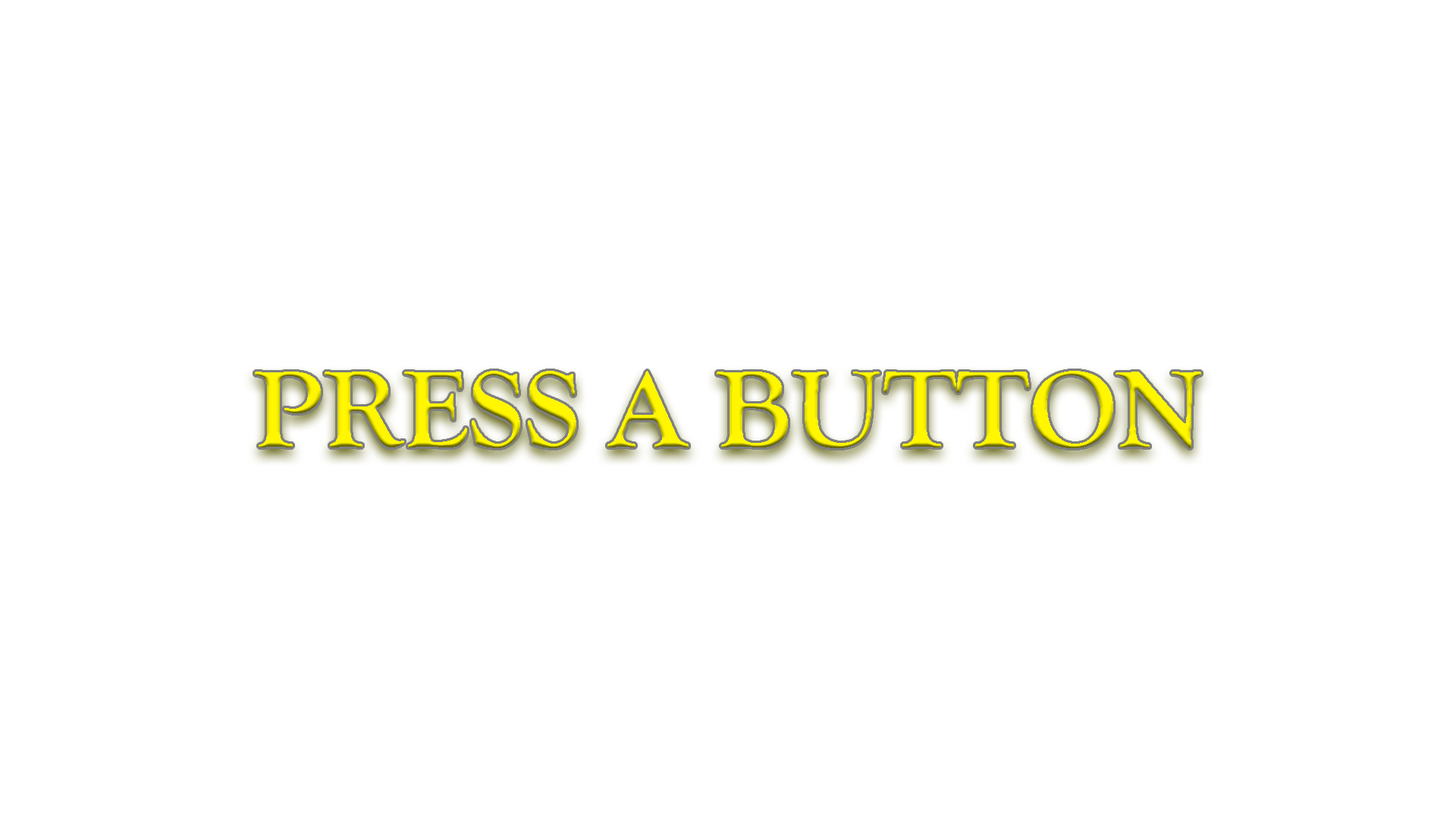
<style>
.page{position:relative;width:1456px;height:819px;background:#ffffff}
.page>*{position:absolute;margin:0}
.t1{font:113.7px "GoudyOldStyleT-Bold";color:#fff600}
</style>
<div class="page">
<p class="t1" style="left:255px;top:371px;width:946px;height:77px">PRESS A BUTTON</p>
</div>
